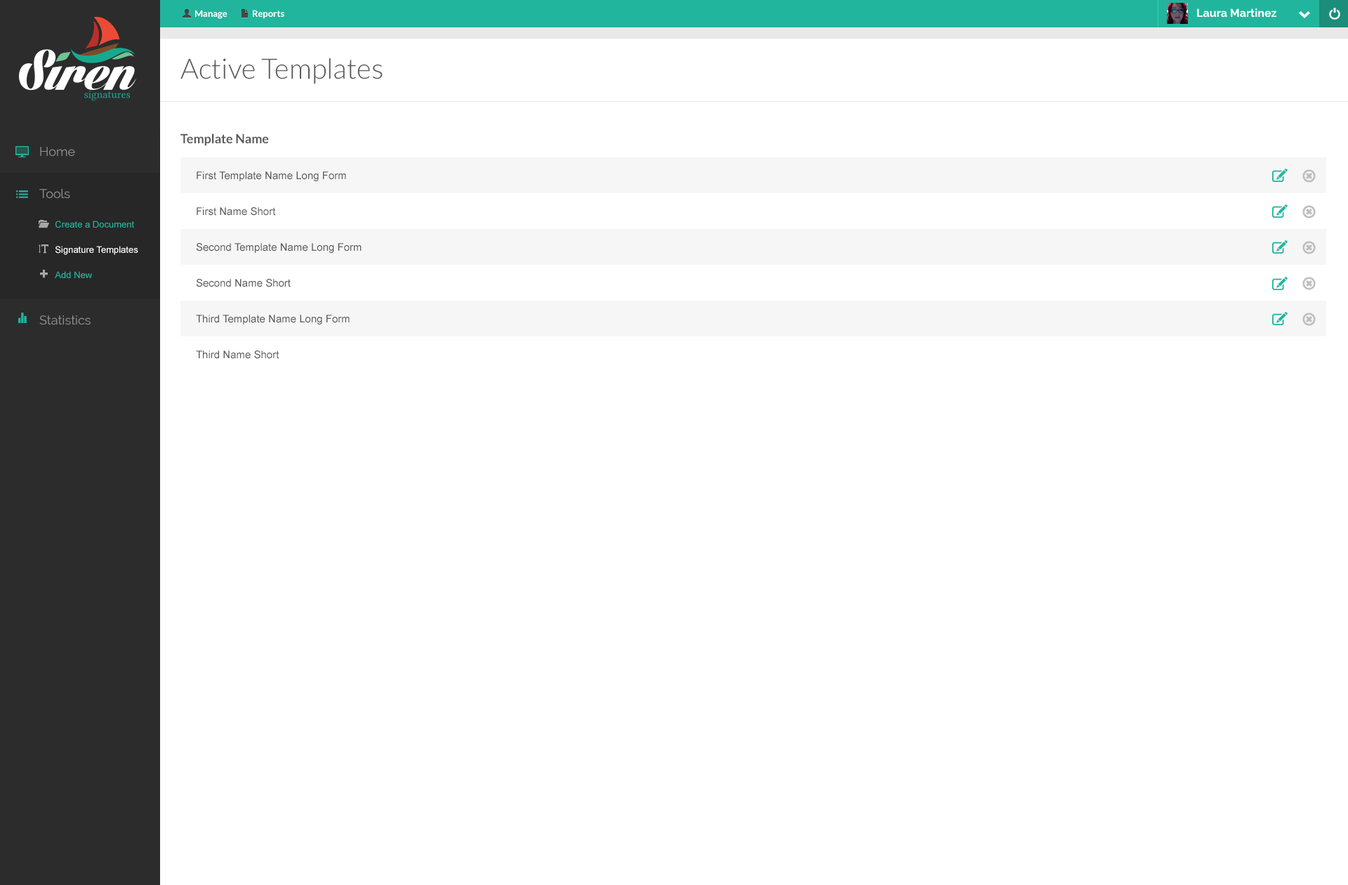
<style>
.page{position:relative;width:1348px;height:885px;background:#ffffff}
.page>*{position:absolute;margin:0}
.t1{font:9.1px "Lato-Bold";color:#ffffff}
.t2{font:11.2px "Raleway-Bold";color:#ffffff}
.t3{font:28.1px "Lato-Light";color:#5a5a5a}
.t4{font:12.6px "Lato-Bold";color:#5a5a5a}
.t5{font:12.6px/42.1px "Raleway";color:#919191}
.t6{font:10.5px/35.8px "ArialMT";color:#5a5a5a}
.t7{font:9.1px/25.3px "ArialMT";color:#ffffff}
.t8{font:9.1px/25.3px "ArialMT";color:#22b59d}
</style>
<div class="page">
<p class="t1" style="left:195px;top:10px;width:89px;height:9px">Manage              Reports</p>
<p class="t2" style="left:1197px;top:8px;width:79px;height:10px">Laura Martinez</p>
<p class="t3" style="left:180px;top:58px;width:203px;height:26px">Active Templates</p>
<p class="t4" style="left:180px;top:133px;width:89px;height:13px">Template Name</p>
<p class="t5" style="left:39px;top:147px;width:52px;height:178px;text-align:justify">Home<br>Tools<br><br><br>Statistics</p>
<p class="t6" style="left:196px;top:171px;width:166px;height:188px;text-align:justify">First Template Name Long Form<br>First Name Short<br>Second Template Name Long Form<br>Second Name Short<br>Third Template Name Long Form<br>Third Name Short</p>
<p class="t7" style="left:55px;top:220px;width:83px;height:58px;text-align:justify"><span class="t8">Create a Document<br></span>Signature Templates<br><span class="t8">Add New</span></p>
</div>
